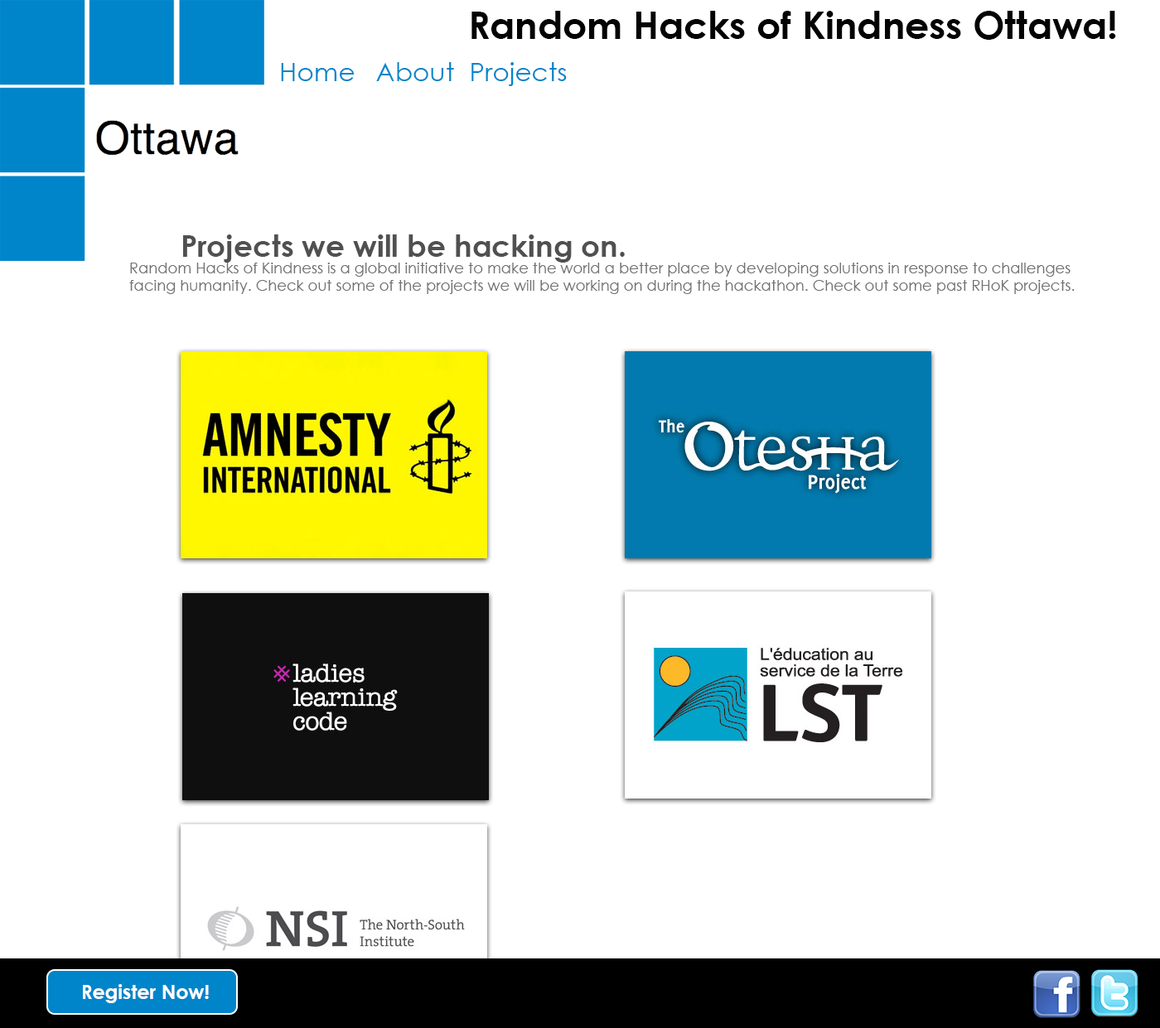
<style>
.page{position:relative;width:1160px;height:1028px;background:#ffffff}
.page>*{position:absolute;margin:0}
.t1{font:37.8px "CenturyGothic-Bold";color:#030303}
.t2{font:26px "CenturyGothic";color:#0085ca}
.t3{font:29.8px "CenturyGothic-Bold";color:#515050}
.t4{font:14.9px "CenturyGothic";color:#727272}
.t5{font:19.7px "CenturyGothic-Bold";color:#ffffff}
</style>
<div class="page">
<p class="t1" style="left:471px;top:11px;width:645px;height:29px">Random Hacks of Kindness Ottawa!</p>
<p class="t2" style="left:281px;top:63px;width:74px;height:18px">Home</p>
<p class="t2" style="left:376px;top:62px;width:78px;height:19px">About</p>
<p class="t2" style="left:471px;top:62px;width:96px;height:24px">Projects</p>
<p class="t3" style="left:183px;top:234px;width:442px;height:29px">Projects we will be hacking on.</p>
<p class="t4" style="left:129px;top:263px;width:946px;height:31px">Random Hacks of Kindness is a global initiative to make the world a better place by developing solutions in response to challenges <br>facing humanity. Check out some of the projects we will be working on during the hackathon. Check out some past RHoK projects.</p>
<p class="t5" style="left:83px;top:984px;width:126px;height:19px">Register Now!</p>
</div>
